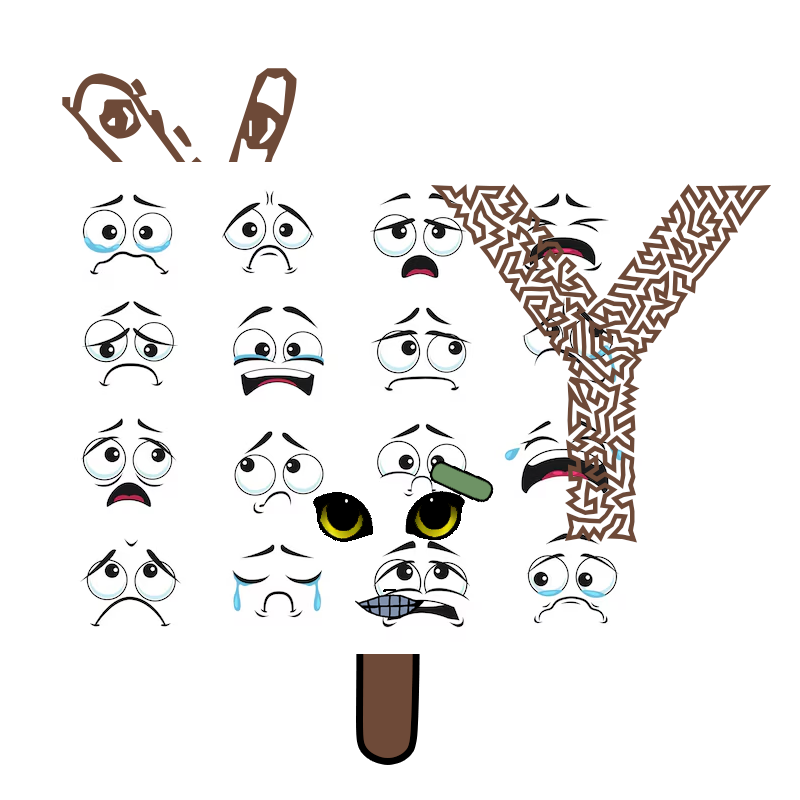
<style>
.page{position:relative;width:800px;height:800px;background:#ffffff}
.page>*{position:absolute;margin:0}
.t1{font:500px "Denne's-Aliens"}
.t2{font:500px "AlienSign";color:#6e4a38}
.t3{font:500px "YippieYeah-Sans"}
</style>
<div class="page">
<p class="t1" style="left:62px;top:68px;width:259px;height:355px">Y</p>
<p class="t2" style="left:431px;top:183px;width:340px;height:360px">Y</p>
<p class="t3" style="left:265px;top:419px;width:238px;height:339px">Y</p>
</div>
